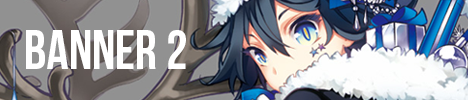
<style>
.page{position:relative;width:468px;height:100px}
.page>*{position:absolute;margin:0}
.t1{font:54.7px "BebasNeue";color:#ffffff}
</style>
<div class="page">
<p class="t1" style="left:26px;top:30px;width:160px;height:39px">BANNER 2</p>
</div>
